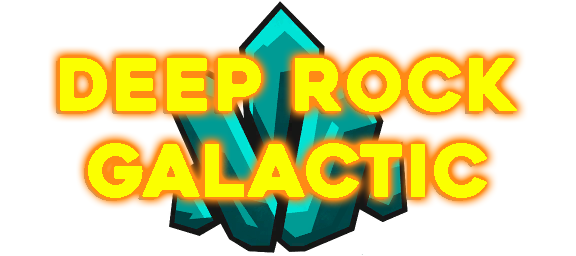
<style>
.page{position:relative;width:576px;height:256px;background:#ffffff}
.page>*{position:absolute;margin:0}
.t1{font:72px "Heavitas";letter-spacing:0.025em;color:#fbff00}
</style>
<div class="page">
<p class="t1" style="left:60px;top:57px;width:457px;height:141px;text-align:center">deep rock<br>galactic</p>
</div>
